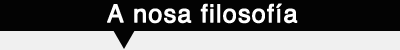
<style>
.page{position:relative;width:400px;height:50px;background:#030303}
.page>*{position:absolute;margin:0}
.t1{font:25px "Helvetica";letter-spacing:0.025em;color:#ffffff;font-weight:bold}
</style>
<div class="page">
<p class="t1" style="left:107px;top:3px;width:191px;height:21px">A nosa filosofía</p>
</div>
